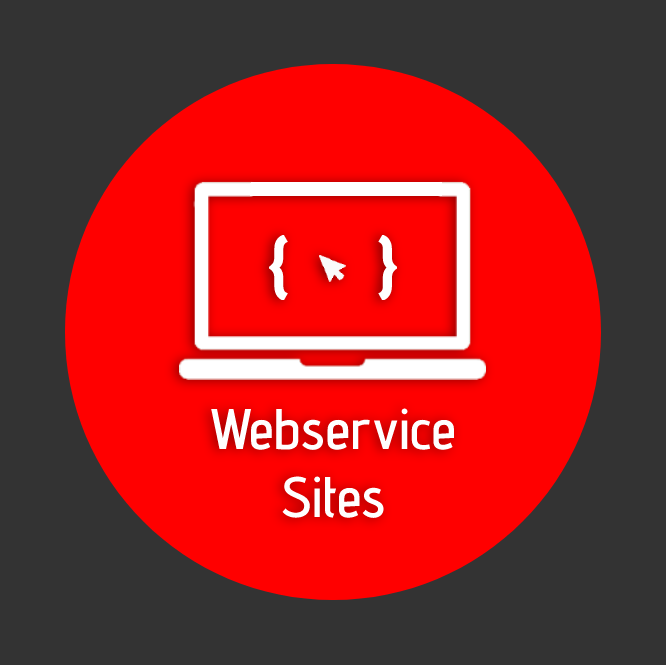
<style>
.page{position:relative;width:666px;height:665px;background:#333333}
.page>*{position:absolute;margin:0}
.t1{font:66.2px "AdventPro-SemiBold";color:#ffffff}
.t2{font:57px "AdventPro-SemiBold";color:#ffffff}
</style>
<div class="page">
<p class="t1" style="left:269px;top:235px;width:128px;height:65px">{      }</p>
<p class="t2" style="left:211px;top:408px;width:244px;height:110px;text-align:center">Webservice<br>Sites</p>
</div>
